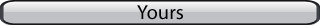
<style>
.page{position:relative;width:320px;height:25px;background:#c0c1c4}
.page>*{position:absolute;margin:0}
.t1{font:20.3px "MyriadPro-Regular";letter-spacing:0.005em;color:#000000}
</style>
<div class="page">
<p class="t1" style="left:137px;top:5px;width:46px;height:15px">Yours</p>
</div>
